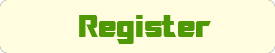
<style>
.page{position:relative;width:275px;height:53px;background:#fffcdf}
.page>*{position:absolute;margin:0}
.t1{font:36px "SFTransRobotics";color:#4f9906}
</style>
<div class="page">
<p class="t1" style="left:79px;top:15px;width:132px;height:29px">Register</p>
</div>
